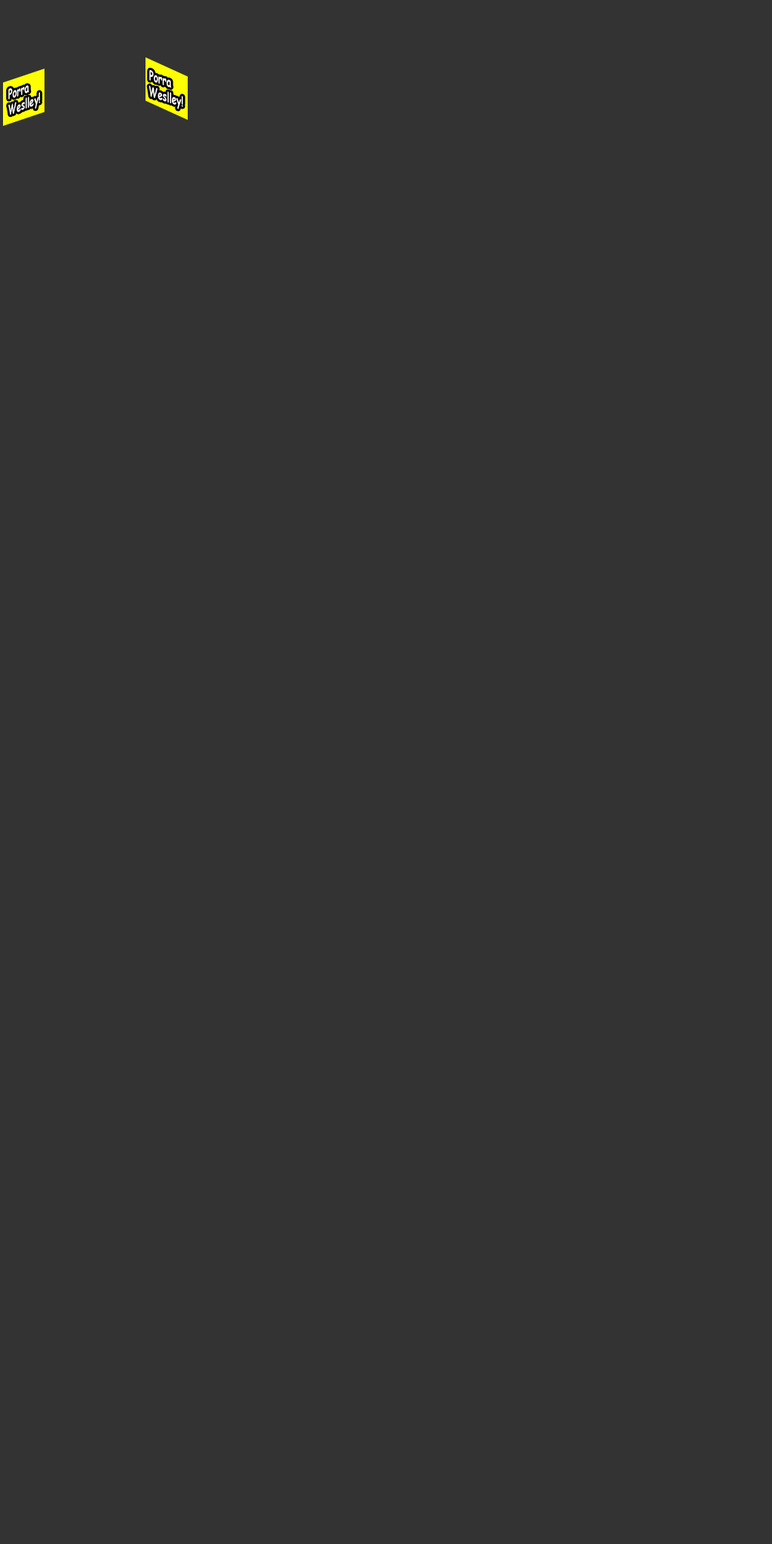
<style>
.page{position:relative;width:772px;height:1544px;background:#333333}
.page>*{position:absolute;margin:0}
.t1{font:13.6px "ComicSansMS-Bold";color:#ffffff;scale:0.67 1}
.t2{font:13.6px "ComicSansMS-Bold";color:#ffffff;scale:0.64 1}
</style>
<div class="page">
<p class="t1" style="left:149px;top:69px;width:23px;height:19px;rotate:18deg">Porra</p>
<p class="t2" style="left:8px;top:85px;width:21px;height:15px;rotate:-21deg">Porra</p>
<p class="t1" style="left:149px;top:85px;width:34px;height:24px;rotate:18deg">Weslley!</p>
<p class="t2" style="left:8px;top:92px;width:33px;height:23px;rotate:-21deg">Weslley!</p>
</div>
